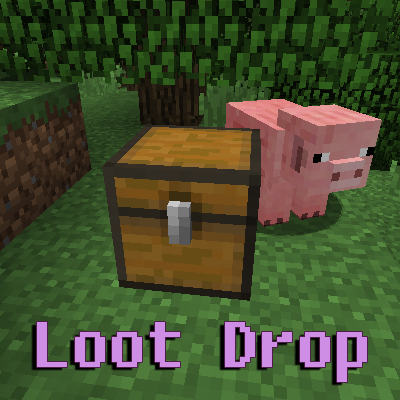
<style>
.page{position:relative;width:400px;height:400px}
.page>*{position:absolute;margin:0}
.t1{font:60px "Fixedsys";color:#ce8de4}
</style>
<div class="page">
<p class="t1" style="left:37px;top:322px;width:330px;height:60px">Loot Drop</p>
</div>
